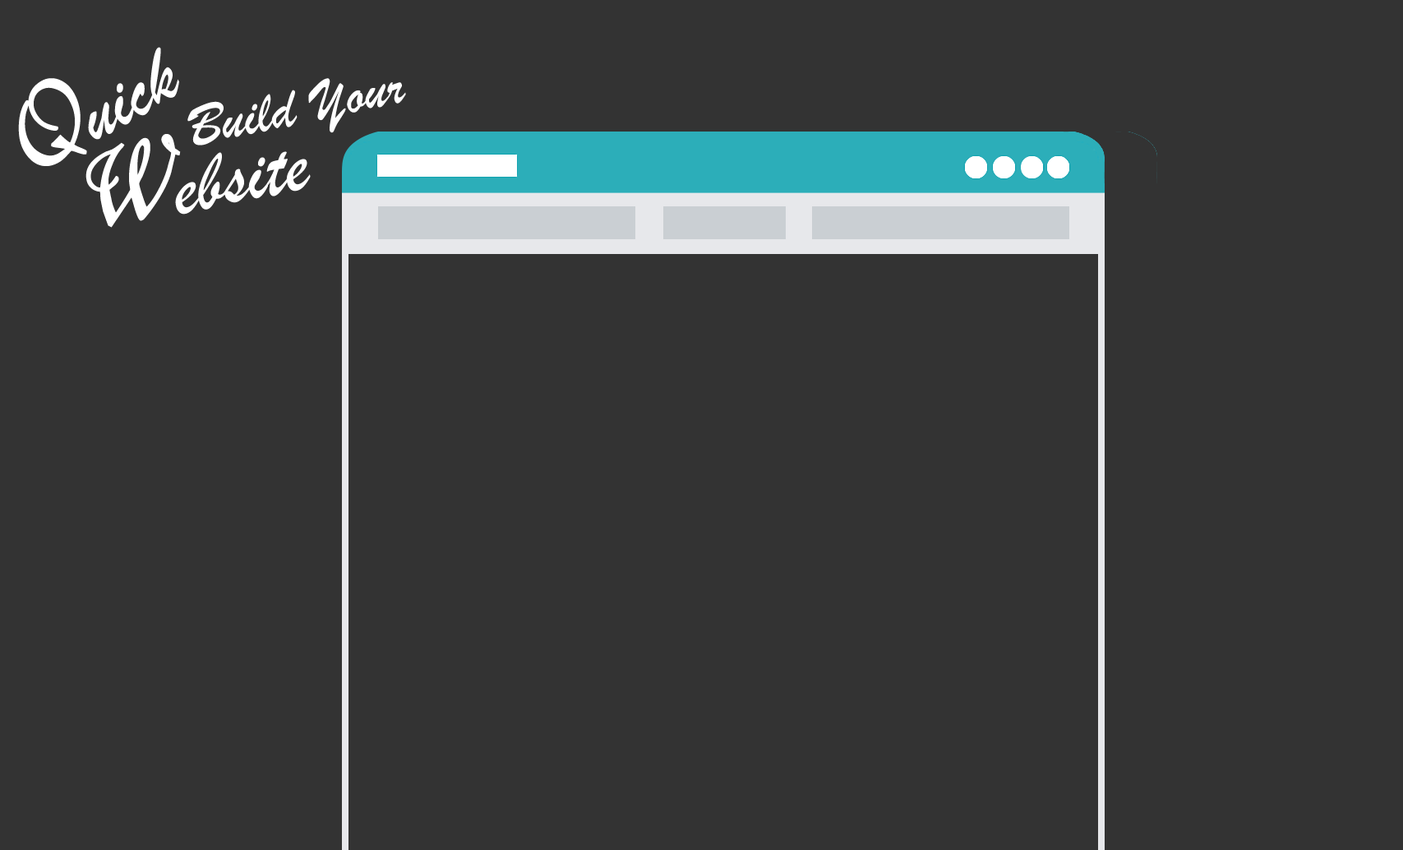
<style>
.page{position:relative;width:1403px;height:850px;background:#333333}
.page>*{position:absolute;margin:0}
.t1{font:80.6px "BrushScriptMT";color:#ffffff}
.t2{font:100.8px "Esperanza";color:#ffffff;font-weight:bold}
.t3{font:59.8px "BrushScriptMT";color:#ffffff}
</style>
<div class="page">
<p class="t1" style="left:88px;top:47px;width:91px;height:93px;rotate:-31deg">uick</p>
<p class="t2" style="left:18px;top:78px;width:69px;height:88px;rotate:-31deg">Q</p>
<p class="t3" style="left:187px;top:90px;width:111px;height:55px;rotate:-12deg">Build</p>
<p class="t3" style="left:308px;top:78px;width:98px;height:55px;rotate:-12deg">Your</p>
<p class="t2" style="left:85px;top:134px;width:96px;height:94px;rotate:-12deg">W</p>
<p class="t1" style="left:175px;top:151px;width:136px;height:64px;rotate:-12deg">ebsite</p>
</div>
